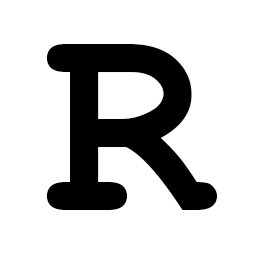
<style>
.page{position:relative;width:260px;height:260px;background:#ffffff}
.page>*{position:absolute;margin:0}
.t1{font:280px "CourierNewPS-BoldMT";color:#000000}
</style>
<div class="page">
<p class="t1" style="left:46px;top:44px;width:171px;height:166px">R</p>
</div>
